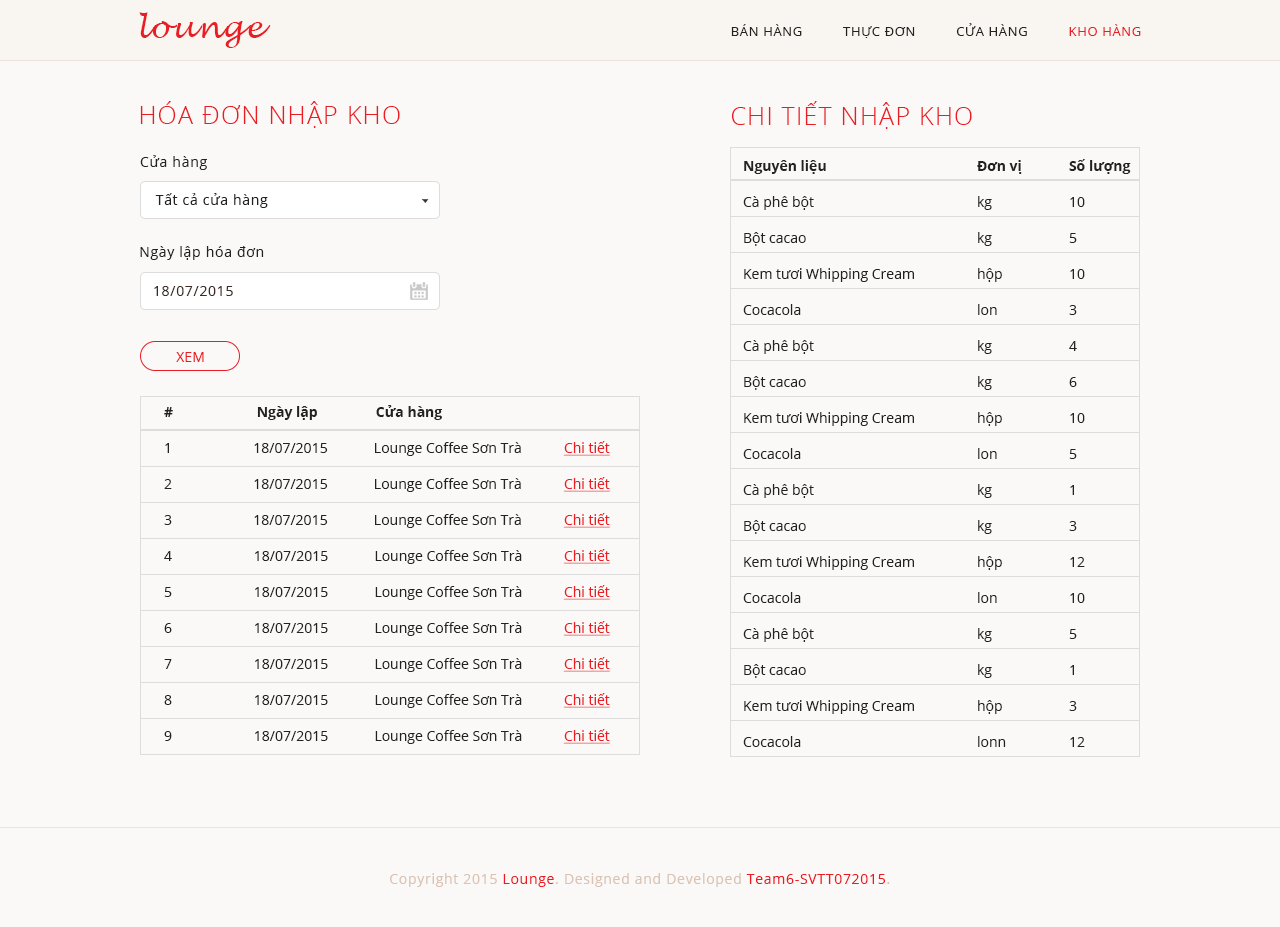
<style>
.page{position:relative;width:1280px;height:927px;background:#fbf9f7}
.page>*{position:absolute;margin:0}
.t1{font:30px "LucidaHandwriting-Italic";letter-spacing:0.05em;color:#ea1d24}
.t2{font:13px "OpenSans";letter-spacing:0.05em;color:#222222}
.t3{font:13px "OpenSans";letter-spacing:0.05em;color:#ea1d24}
.t4{font:25px "OpenSans-Light";letter-spacing:0.05em;color:#ea1d24}
.t5{font:14px "OpenSans";letter-spacing:0.05em;color:#222222}
.t6{font:14px/36px "OpenSans";color:#222222}
.t7{font:14px/36px "OpenSans-Bold";color:#222222}
.t8{font:14px "OpenSans";letter-spacing:0.05em;color:#3d2a23}
.t9{font:14px "OpenSans";color:#ea1d24}
.t10{font:14px/36px "OpenSans";color:#ea1d24;text-decoration:underline}
.t11{font:14px "OpenSans";letter-spacing:0.05em;color:#dac3b4}
.t12{font:14px "OpenSans";letter-spacing:0.05em;color:#ea1b23}
</style>
<div class="page">
<p class="t1" style="left:139px;top:12px;width:132px;height:36px">lounge</p>
<p class="t2" style="left:731px;top:23px;width:410px;height:15px">BÁN HÀNG          THỰC ĐƠN          CỬA HÀNG      <span class="t3">    KHO HÀNG</span></p>
<p class="t4" style="left:140px;top:101px;width:260px;height:27px">HÓA ĐƠN NHẬP KHO</p>
<p class="t4" style="left:732px;top:101px;width:240px;height:28px">CHI TIẾT NHẬP KHO</p>
<p class="t5" style="left:140px;top:155px;width:67px;height:15px">Cửa hàng</p>
<p class="t6" style="left:743px;top:160px;width:171px;height:587px"><span class="t7">Nguyên liệu     <br></span>Cà phê bột      <br>Bột cacao  <br>Kem tươi Whipping Cream   <br>Cocacola      <br>Cà phê bột  <br>Bột cacao  <br>Kem tươi Whipping Cream<br>Cocacola   <br>Cà phê bột<br>Bột cacao           <br>Kem tươi Whipping Cream <br>Cocacola <br>Cà phê bột  <br>Bột cacao <br>Kem tươi Whipping Cream <br>Cocacola</p>
<p class="t6" style="left:977px;top:160px;width:45px;height:587px"><span class="t7">Đơn vị<br></span>kg<br>kg<br>hộp<br>lon<br>kg<br>kg<br>hộp<br>lon<br>kg<br>kg<br>hộp<br>lon<br>kg<br>kg<br>hộp<br>lonn</p>
<p class="t6" style="left:1069px;top:159px;width:62px;height:588px"><span class="t7">Số lượng<br></span>10<br>5<br>10<br>3<br>4<br>6<br>10<br>5<br>1<br>3<br>12<br>10<br>5<br>1<br>3<br>12</p>
<p class="t5" style="left:155px;top:193px;width:113px;height:15px">Tất cả cửa hàng</p>
<p class="t5" style="left:140px;top:246px;width:124px;height:14px">Ngày lập hóa đơn</p>
<p class="t8" style="left:154px;top:286px;width:79px;height:10px">18/07/2015</p>
<p class="t9" style="left:176px;top:352px;width:28px;height:10px">XEM</p>
<p class="t6" style="left:164px;top:405px;width:358px;height:339px"><span class="t7">#                       Ngày lập                Cửa hàng<br></span>1                      18/07/2015             Lounge Coffee Sơn Trà <br>2                      18/07/2015             Lounge Coffee Sơn Trà <br>3                      18/07/2015             Lounge Coffee Sơn Trà <br>4                      18/07/2015             Lounge Coffee Sơn Trà   <br>5                      18/07/2015             Lounge Coffee Sơn Trà <br>6                      18/07/2015             Lounge Coffee Sơn Trà <br>7                      18/07/2015             Lounge Coffee Sơn Trà   <br>8                      18/07/2015             Lounge Coffee Sơn Trà    <br>9                      18/07/2015             Lounge Coffee Sơn Trà</p>
<p class="t10" style="left:563px;top:441px;width:47px;height:303px">Chi tiết<br>Chi tiết<br>Chi tiết<br>Chi tiết<br>Chi tiết<br>Chi tiết<br>Chi tiết<br>Chi tiết<br>Chi tiết</p>
<p class="t11" style="left:390px;top:873px;width:500px;height:14px">Copyright 2015 <span class="t12">Lounge</span>. Designed and Developed <span class="t12">Team6-SVTT072015</span>.</p>
</div>
